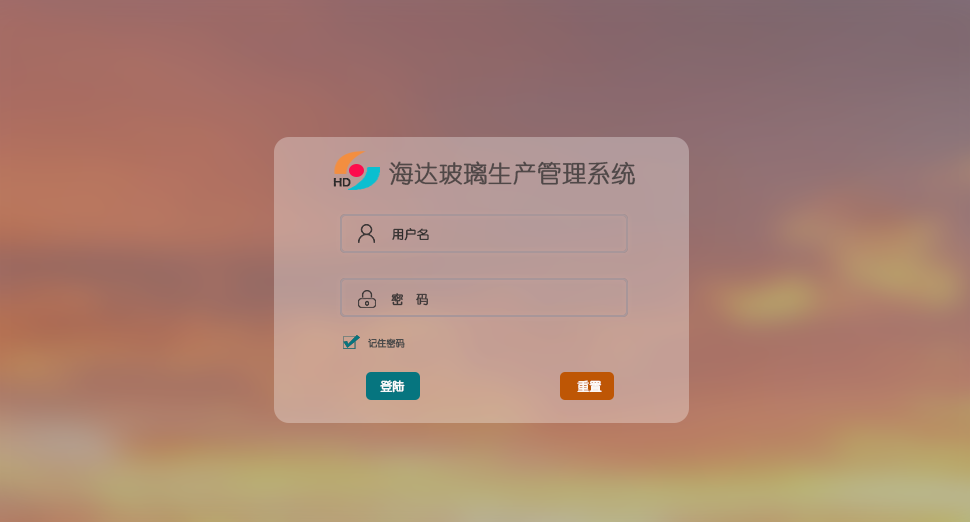
<style>
.page{position:relative;width:970px;height:522px}
.page>*{position:absolute;margin:0}
.t1{font:24px "YouYuan";color:#3e3a3a;font-weight:bold}
.t2{font:12px "BerlinSansFB-Reg";color:#2c2b2b;font-weight:bold}
.t3{font:12px "YouYuan";color:#2c2b2b;font-weight:bold}
.t4{font:12px "YouYuan";color:#3c3737;font-weight:bold}
.t5{font:9px "YouYuan";color:#4b4b4b;font-weight:bold}
.t6{font:12px "YouYuan";color:#ffffff;font-weight:bold}
</style>
<div class="page">
<p class="t1" style="left:389px;top:161px;width:246px;height:24px;opacity:0.89">海达玻璃生产管理系统</p>
<p class="t2" style="left:333px;top:178px;width:18px;height:9px">HD</p>
<p class="t3" style="left:392px;top:228px;width:37px;height:13px">用户名</p>
<p class="t4" style="left:391px;top:293px;width:37px;height:13px">密  码</p>
<p class="t5" style="left:368px;top:338px;width:37px;height:10px">记住密码</p>
<p class="t6" style="left:380px;top:380px;width:25px;height:13px">登陆</p>
<p class="t6" style="left:577px;top:380px;width:25px;height:12px">重置</p>
</div>
